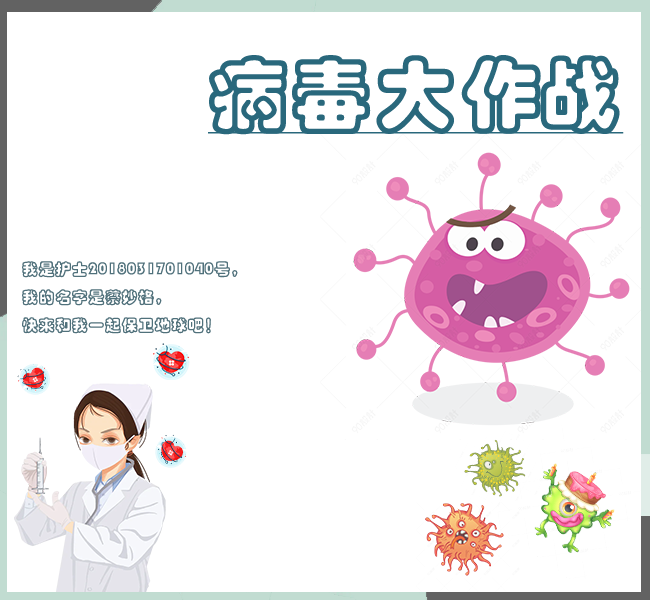
<style>
.page{position:relative;width:650px;height:600px;background:#ffffff}
.page>*{position:absolute;margin:0}
.t1{font:80px "STCaiyun";letter-spacing:0.01em;color:#29687c;text-transform:uppercase;font-weight:bold;text-decoration:underline}
.t2{font:16px "STCaiyun";letter-spacing:0.01em;color:#50717b;text-transform:uppercase;font-weight:bold}
</style>
<div class="page">
<p class="t1" style="left:208px;top:55px;width:416px;height:80px">病毒大作战</p>
<p class="t2" style="left:22px;top:261px;width:216px;height:73px">我是护士2018031701040号，<br>我的名字是蔡妙格，<br>快来和我一起保卫地球吧！</p>
</div>
